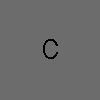
<style>
.page{position:relative;width:100px;height:100px;background:#6c6c6c}
.page>*{position:absolute;margin:0}
.t1{font:30px "FranklinGothic-Book";color:#000000}
</style>
<div class="page">
<p class="t1" style="left:43px;top:39px;width:15px;height:20px">C</p>
</div>
